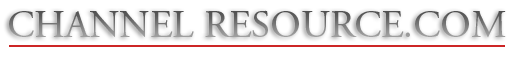
<style>
.page{position:relative;width:515px;height:57px;background:#ffffff}
.page>*{position:absolute;margin:0}
.t1{font:38.8px "AGaramondPro-Regular"}
</style>
<div class="page">
<p class="t1" style="left:9px;top:10px;width:497px;height:28px">CHANNEL RESOURCE.COM</p>
</div>
